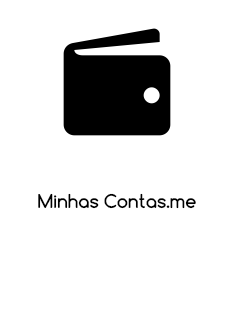
<style>
.page{position:relative;width:240px;height:320px;background:#ffffff}
.page>*{position:absolute;margin:0}
.t1{font:18px "Comfortaa-Bold";color:#000000}
</style>
<div class="page">
<p class="t1" style="left:38px;top:193px;width:158px;height:16px">Minhas Contas.me</p>
</div>
